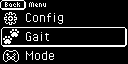
<style>
.page{position:relative;width:128px;height:64px;background:#000000}
.page>*{position:absolute;margin:0}
.t1{font:8px "6pxNormal";color:#ffffff}
.t2{font:16px "PixelOperator";color:#ffffff}
</style>
<div class="page">
<p class="t1" style="left:5px;top:2px;width:15px;height:5px">Back</p>
<p class="t1" style="left:29px;top:2px;width:17px;height:5px">Menu</p>
<p class="t2" style="left:26px;top:13px;width:37px;height:11px">Config</p>
<p class="t2" style="left:26px;top:32px;width:23px;height:9px">Gait</p>
<p class="t2" style="left:26px;top:51px;width:28px;height:9px">Mode</p>
</div>
